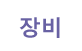
<style>
.page{position:relative;width:82px;height:51px;background:#ffffff}
.page>*{position:absolute;margin:0}
.t1{font:22px "MalgunGothicBold";color:#6861a3}
</style>
<div class="page">
<p class="t1" style="left:19px;top:17px;width:41px;height:21px">장비</p>
</div>
